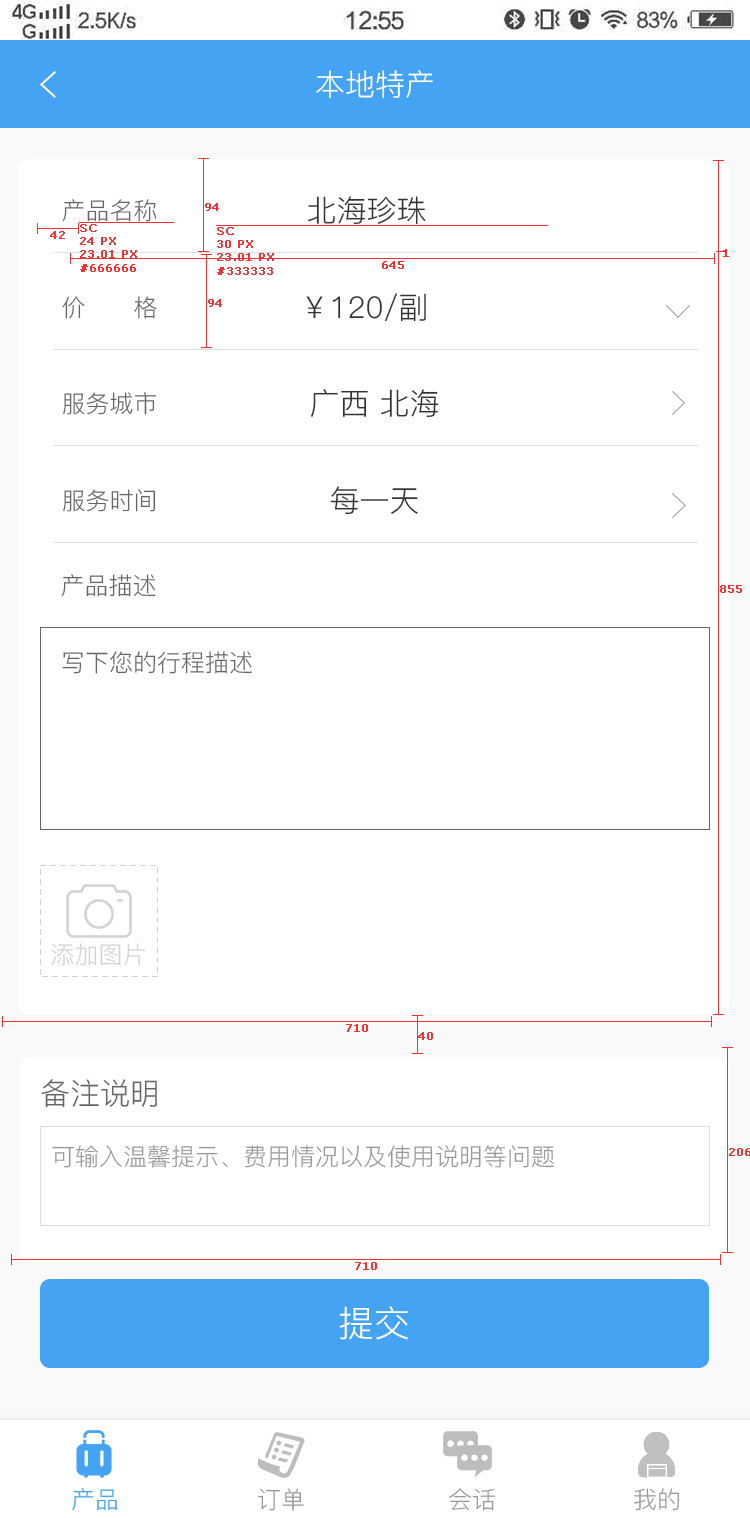
<style>
.page{position:relative;width:750px;height:1518px;background:#ffffff}
.page>*{position:absolute;margin:0}
.t1{font:30px "PingFang-SC-Regular";color:#ffffff;text-transform:uppercase}
.t2{font:30px "PingFang-SC-Regular";color:#333333;text-transform:uppercase}
.t3{font:24px "PingFang-SC-Regular";color:#666666;text-transform:uppercase}
.t4{font:11px "Verdana";color:#f83030;font-weight:bold}
.t5{font:24px "PingFang-SC-Regular";color:#d3d3d3;text-transform:uppercase}
.t6{font:30px "PingFang-SC-Regular";color:#666666;text-transform:uppercase}
.t7{font:24px "PingFang-SC-Regular";color:#999999;text-transform:uppercase}
.t8{font:36px "PingFang-SC-Regular";color:#ffffff;text-transform:uppercase}
.t9{font:24px "PingFang-SC-Regular";color:#44a3f2;text-transform:uppercase}
</style>
<div class="page">
<p class="t1" style="left:316px;top:70px;width:117px;height:29px">本地特产</p>
<p class="t2" style="left:308px;top:196px;width:118px;height:29px">北海珍珠</p>
<p class="t3" style="left:62px;top:199px;width:95px;height:23px">产品名称</p>
<p class="t4" style="left:205px;top:203px;width:14px;height:8px">94</p>
<p class="t4" style="left:50px;top:231px;width:15px;height:8px">42</p>
<p class="t4" style="left:80px;top:224px;width:57px;height:48px">SC<br>24 PX<br>23.01 PX<br>#666666</p>
<p class="t4" style="left:217px;top:227px;width:57px;height:48px">SC<br>30 PX<br>23.01 PX<br>#333333</p>
<p class="t4" style="left:723px;top:249px;width:6px;height:8px">1</p>
<p class="t4" style="left:382px;top:261px;width:22px;height:8px">645</p>
<p class="t2" style="left:306px;top:293px;width:120px;height:29px">￥120/副</p>
<p class="t3" style="left:62px;top:296px;width:95px;height:23px">价      格</p>
<p class="t4" style="left:208px;top:299px;width:14px;height:8px">94</p>
<p class="t2" style="left:311px;top:389px;width:128px;height:29px">广西 北海</p>
<p class="t3" style="left:63px;top:392px;width:93px;height:23px">服务城市</p>
<p class="t2" style="left:330px;top:486px;width:88px;height:29px">每一天</p>
<p class="t3" style="left:63px;top:489px;width:93px;height:23px">服务时间</p>
<p class="t3" style="left:61px;top:574px;width:95px;height:23px">产品描述</p>
<p class="t4" style="left:720px;top:585px;width:22px;height:8px">855</p>
<p class="t3" style="left:62px;top:651px;width:190px;height:23px">写下您的行程描述</p>
<p class="t5" style="left:51px;top:943px;width:94px;height:23px">添加图片</p>
<p class="t4" style="left:346px;top:1024px;width:22px;height:8px">710</p>
<p class="t4" style="left:418px;top:1032px;width:15px;height:8px">40</p>
<p class="t6" style="left:41px;top:1079px;width:116px;height:29px">备注说明</p>
<p class="t7" style="left:52px;top:1145px;width:502px;height:23px">可输入温馨提示、费用情况以及使用说明等问题</p>
<p class="t4" style="left:729px;top:1148px;width:22px;height:8px">206</p>
<p class="t4" style="left:355px;top:1262px;width:22px;height:8px">710</p>
<p class="t8" style="left:339px;top:1306px;width:70px;height:34px">提交</p>
<p class="t9" style="left:72px;top:1488px;width:45px;height:23px">产品</p>
<p class="t7" style="left:258px;top:1488px;width:46px;height:23px">订单</p>
<p class="t7" style="left:449px;top:1488px;width:46px;height:23px">会话</p>
<p class="t7" style="left:634px;top:1488px;width:46px;height:23px">我的</p>
</div>
